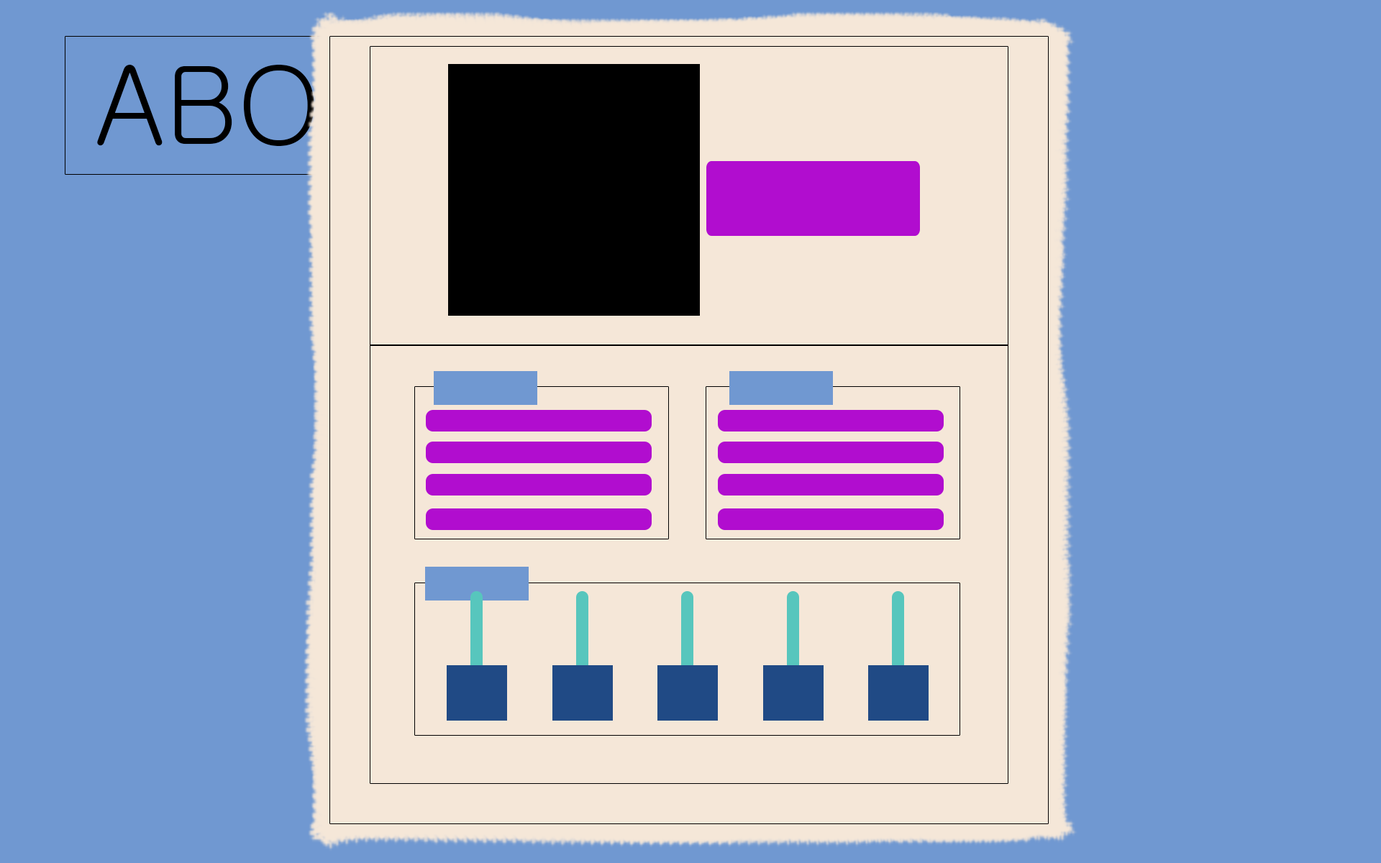
<style>
.page{position:relative;width:1381px;height:863px;background:#7098d1}
.page>*{position:absolute;margin:0}
.t1{font:107.9px "Gulim";color:#000000}
</style>
<div class="page">
<p class="t1" style="left:97px;top:65px;width:359px;height:81px">ABOUT</p>
</div>
